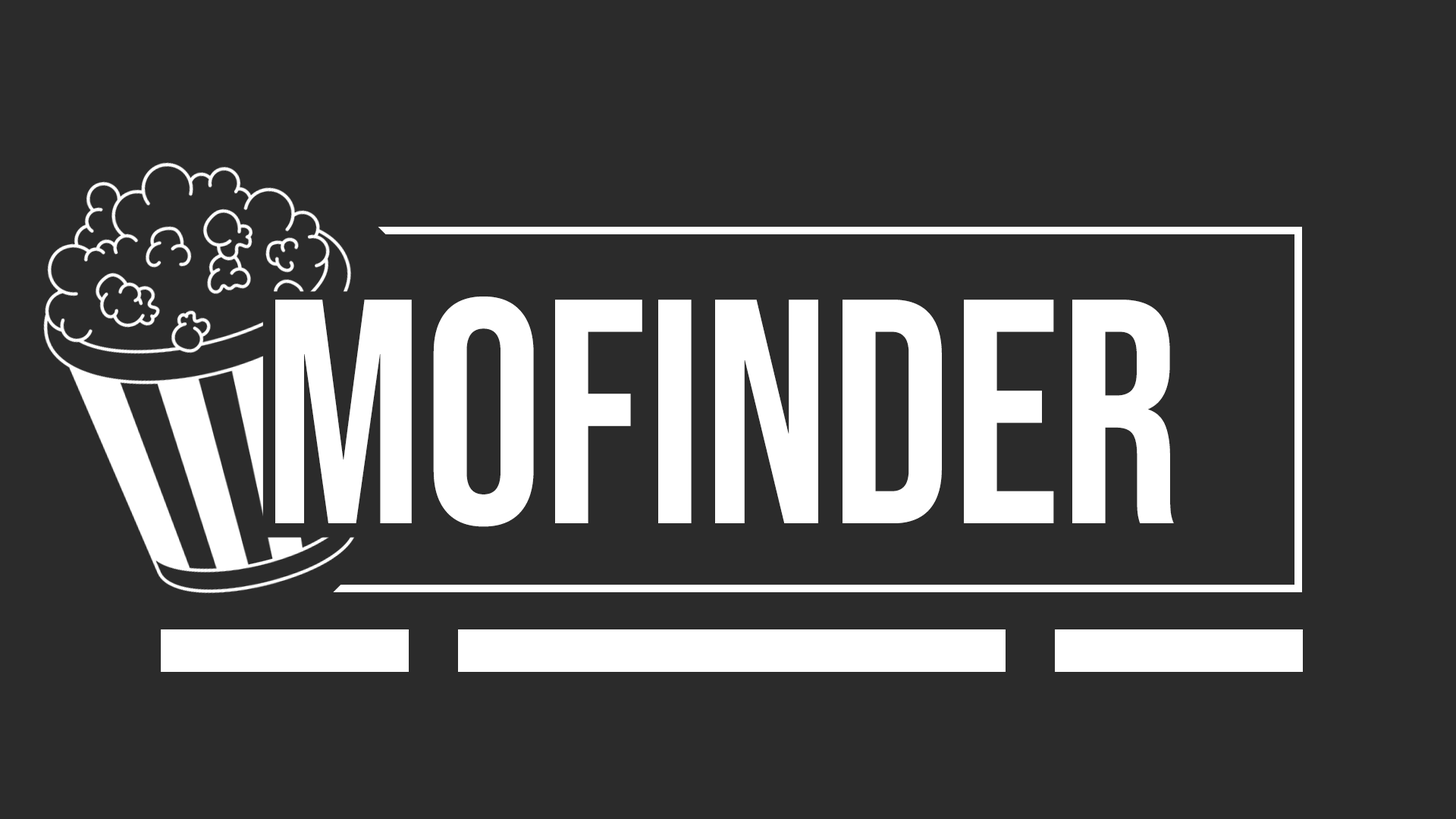
<style>
.page{position:relative;width:1456px;height:819px;background:#2b2b2b}
.page>*{position:absolute;margin:0}
.t1{font:319.3px "BebasNeue-Regular";color:#ffffff;scale:0.93 1}
</style>
<div class="page">
<p class="t1" style="left:275px;top:297px;width:899px;height:230px">MOFINDER</p>
</div>
